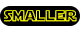
<style>
.page{position:relative;width:80px;height:30px;background:#ffffff}
.page>*{position:absolute;margin:0}
.t1{font:15px "StarJediHollow";color:#ffff00}
</style>
<div class="page">
<p class="t1" style="left:4px;top:10px;width:73px;height:12px">Smaller</p>
</div>
